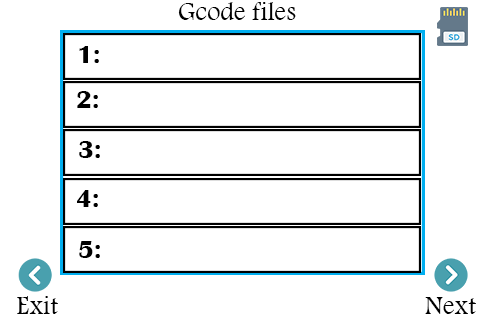
<style>
.page{position:relative;width:480px;height:320px;background:#ffffff}
.page>*{position:absolute;margin:0}
.t1{font:26.5px "Arash";color:#000000}
.t2{font:26.5px "BritannicBold";color:#000000}
</style>
<div class="page">
<p class="t1" style="left:178px;top:2px;width:118px;height:18px">Gcode files</p>
<p class="t2" style="left:79px;top:46px;width:20px;height:17px">:1</p>
<p class="t2" style="left:77px;top:91px;width:21px;height:17px">:2</p>
<p class="t2" style="left:79px;top:141px;width:21px;height:17px">:3</p>
<p class="t2" style="left:77px;top:190px;width:21px;height:17px">:4</p>
<p class="t2" style="left:79px;top:241px;width:21px;height:17px">:5</p>
<p class="t1" style="left:17px;top:296px;width:41px;height:18px">Exit</p>
<p class="t1" style="left:425px;top:297px;width:51px;height:17px">Next</p>
</div>
